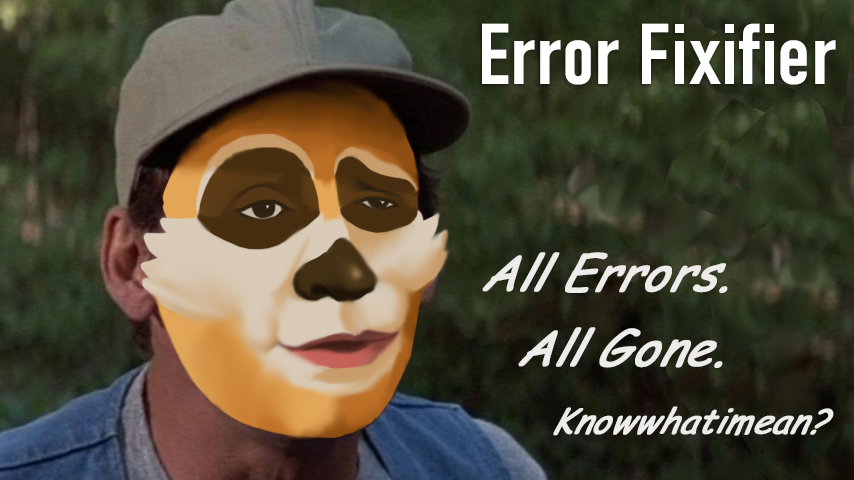
<style>
.page{position:relative;width:854px;height:480px}
.page>*{position:absolute;margin:0}
.t1{font:85px "Bahnschrift-SemiBoldCondensed";color:#ffffff;font-weight:bold}
.t2{font:50.9px/80px "ComicSansMS-Italic";color:#ffffff;font-weight:bold;scale:0.94 1}
.t3{font:36px/72px "ComicSansMS-Italic";color:#ffffff;font-weight:bold;scale:0.94 1}
</style>
<div class="page">
<p class="t1" style="left:482px;top:23px;width:354px;height:62px">Error Fixifier</p>
<p class="t2" style="left:482px;top:252px;width:352px;height:184px">All Errors.<br>    All Gone.<br><span class="t3">           Knowwhatimean?</span></p>
</div>
